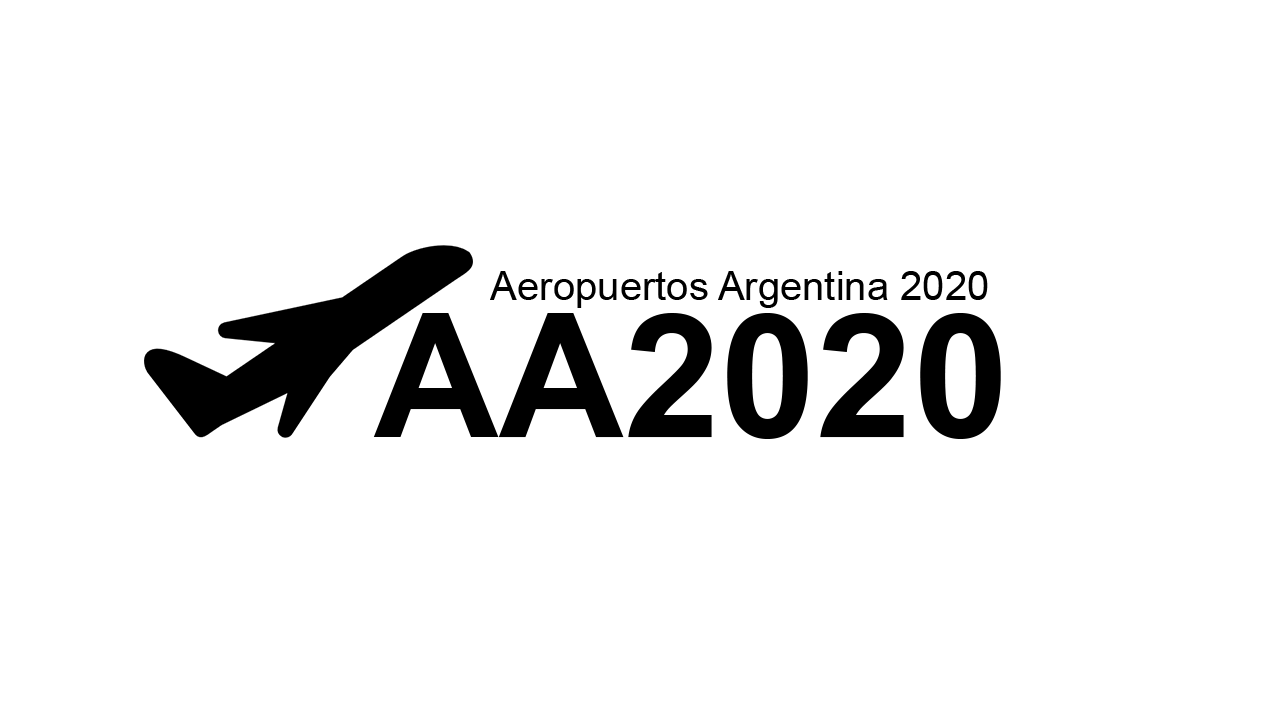
<style>
.page{position:relative;width:1280px;height:720px;background:#ffffff}
.page>*{position:absolute;margin:0}
.t1{font:39.5px "ArialMT";color:#000000}
.t2{font:173.2px "Arial-BoldMT";color:#000000}
</style>
<div class="page">
<p class="t1" style="left:490px;top:271px;width:498px;height:37px">Aeropuertos Argentina 2020</p>
<p class="t2" style="left:373px;top:313px;width:628px;height:126px">AA2020</p>
</div>
